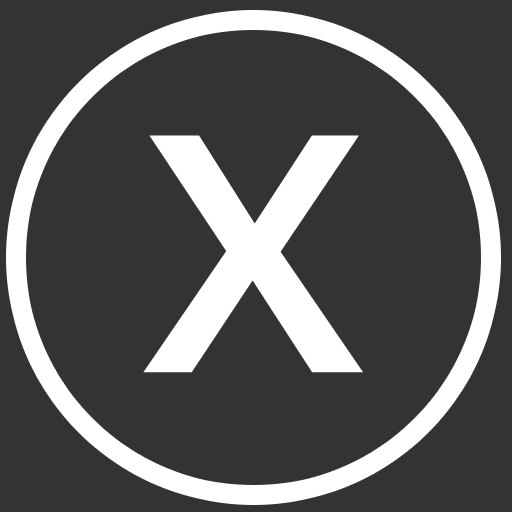
<style>
.page{position:relative;width:512px;height:512px;background:#333333}
.page>*{position:absolute;margin:0}
.t1{font:330.4px "Oxygen-Bold";letter-spacing:0.2em;color:#ffffff;text-transform:uppercase}
</style>
<div class="page">
<p class="t1" style="left:143px;top:135px;width:220px;height:238px">X</p>
</div>
